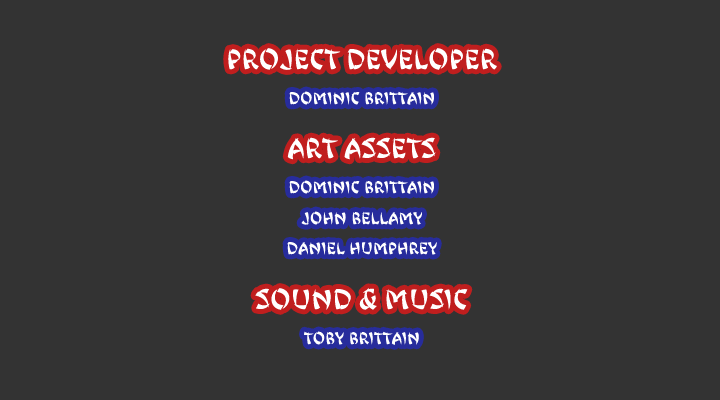
<style>
.page{position:relative;width:720px;height:400px;background:#333333}
.page>*{position:absolute;margin:0}
.t1{font:25px "JingJing";color:#ffffff}
.t2{font:15px "JingJing";color:#ffffff}
</style>
<div class="page">
<p class="t1" style="left:228px;top:48px;width:269px;height:22px">Project Developer</p>
<p class="t2" style="left:289px;top:91px;width:145px;height:14px">Dominic BritTain</p>
<p class="t1" style="left:287px;top:137px;width:149px;height:23px">Art Assets</p>
<p class="t2" style="left:289px;top:180px;width:145px;height:14px">Dominic BritTain</p>
<p class="t2" style="left:301px;top:211px;width:121px;height:14px">John Bellamy</p>
<p class="t2" style="left:287px;top:241px;width:150px;height:14px">Daniel Humphrey</p>
<p class="t1" style="left:255px;top:288px;width:213px;height:22px">Sound &amp; Music</p>
<p class="t2" style="left:304px;top:331px;width:115px;height:14px">TOBY bRITTAIN</p>
</div>
